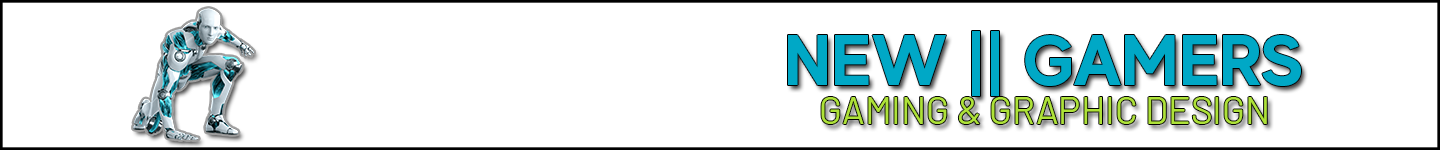
<style>
.page{position:relative;width:1440px;height:150px;background:#ffffff}
.page>*{position:absolute;margin:0}
.t1{font:72px "MADEEvolveSans-Bold";color:#00a8c6}
.t2{font:39.7px "Barlow-Regular";color:#aee239;scale:0.94 1}
</style>
<div class="page">
<p class="t1" style="left:788px;top:31px;width:513px;height:65px">NEW || GAMERS</p>
<p class="t2" style="left:821px;top:97px;width:446px;height:27px">GAMING &amp; GRAPHIC DESIGN</p>
</div>
